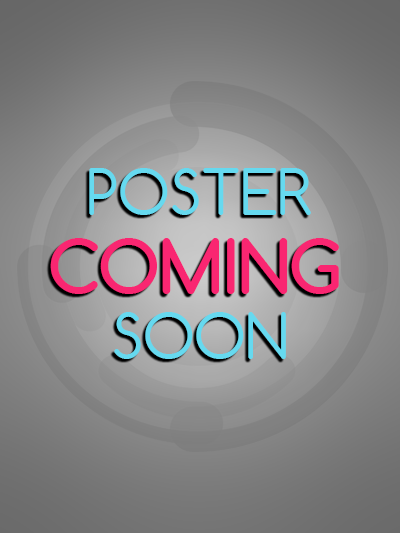
<style>
.page{position:relative;width:400px;height:533px}
.page>*{position:absolute;margin:0}
.t1{font:60px "Comfortaa";color:#66d9ef}
.t2{font:72px "Comfortaa-Bold";color:#f92671}
</style>
<div class="page">
<p class="t1" style="left:89px;top:168px;width:222px;height:191px;text-align:center">POSTER<br><br>SOON</p>
<p class="t2" style="left:50px;top:238px;width:289px;height:56px">COMING</p>
</div>
